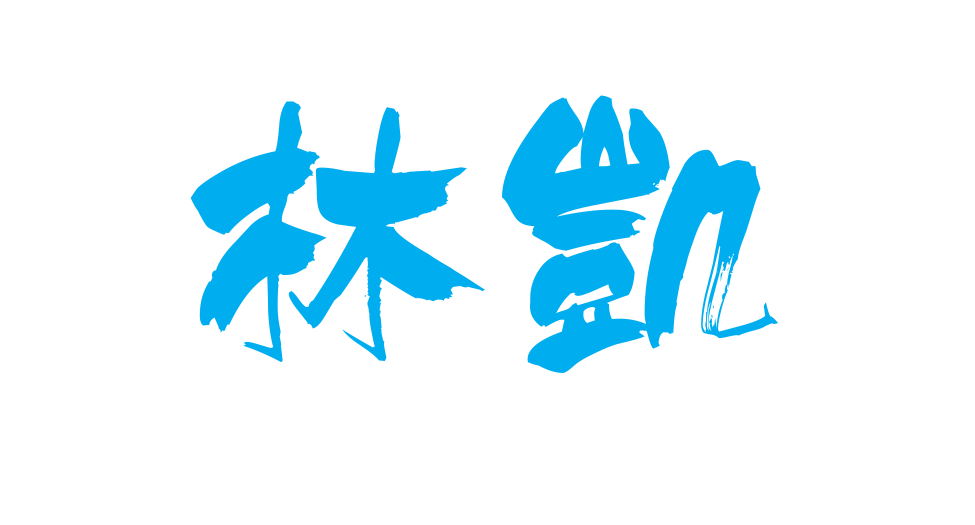
<style>
.page{position:relative;width:975px;height:525px;background:#ffffff}
.page>*{position:absolute;margin:0}
.t1{font:300.2px "Shunpu";color:#00aeef}
</style>
<div class="page">
<p class="t1" style="left:190px;top:95px;width:589px;height:278px">林凱</p>
</div>
